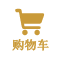
<style>
.page{position:relative;width:60px;height:60px;background:#ffffff}
.page>*{position:absolute;margin:0}
.t1{font:12px "SimSun";color:#c99a39;font-weight:bold}
</style>
<div class="page">
<p class="t1" style="left:12px;top:39px;width:37px;height:12px">购物车</p>
</div>
